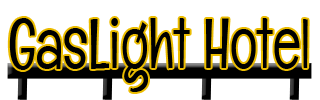
<style>
.page{position:relative;width:320px;height:100px;background:#ffffff}
.page>*{position:absolute;margin:0}
.t1{font:72px "Englebert-Regular";color:#000000;scale:0.8 1}
</style>
<div class="page">
<p class="t1" style="left:9px;top:18px;width:299px;height:74px">GasLight Hotel</p>
</div>
